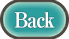
<style>
.page{position:relative;width:69px;height:39px}
.page>*{position:absolute;margin:0}
.t1{font:21px "RyuminPro-ExBold";letter-spacing:-0.08em;color:#ffffff;scale:0.9 1}
</style>
<div class="page">
<p class="t1" style="left:14px;top:12px;width:41px;height:16px">Back</p>
</div>
